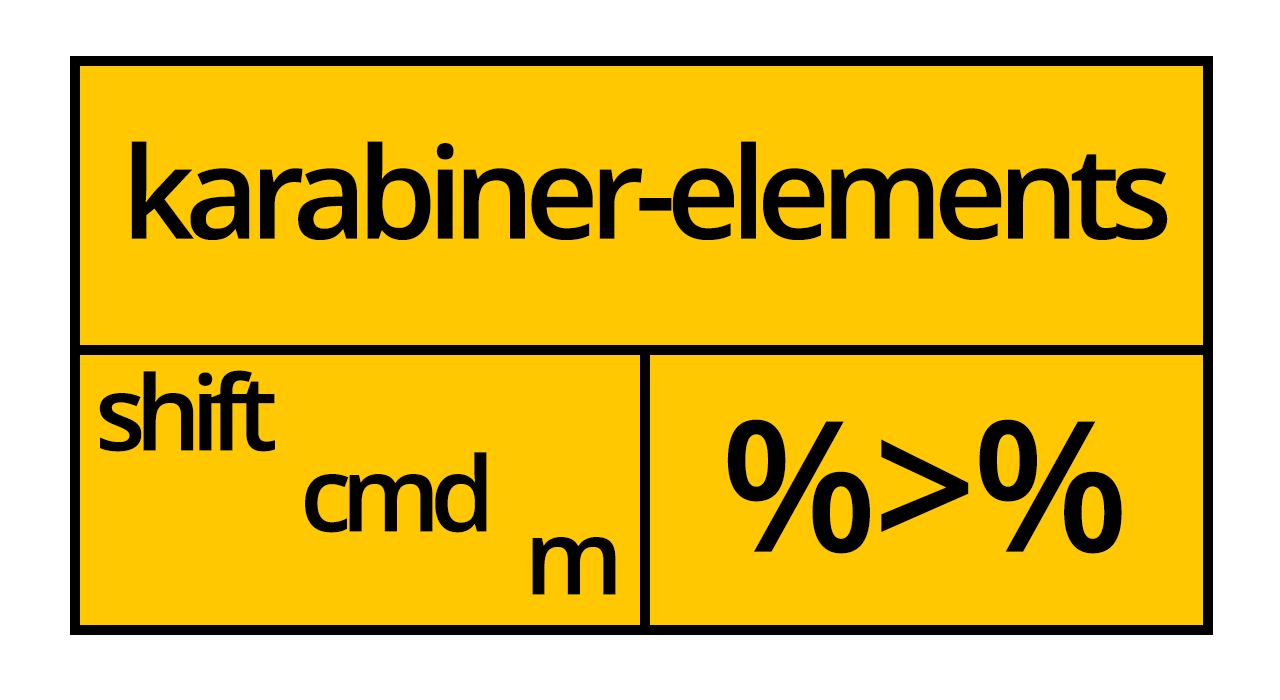
<style>
.page{position:relative;width:1280px;height:700px;background:#ffc800}
.page>*{position:absolute;margin:0}
.t1{font:128px "OpenSans-Semibold";letter-spacing:-0.075em;color:#000000}
.t2{font:104px "OpenSans-Semibold";letter-spacing:-0.1em;color:#000000}
.t3{font:182px "OpenSans-Semibold";letter-spacing:-0.025em;color:#000000}
</style>
<div class="page">
<p class="t1" style="left:131px;top:141px;width:1037px;height:99px">karabiner-elements</p>
<p class="t2" style="left:99px;top:370px;width:176px;height:82px">shift</p>
<p class="t3" style="left:727px;top:419px;width:395px;height:135px">%&gt;%</p>
<p class="t2" style="left:305px;top:452px;width:182px;height:81px">cmd</p>
<p class="t2" style="left:532px;top:537px;width:84px;height:58px">m</p>
</div>
